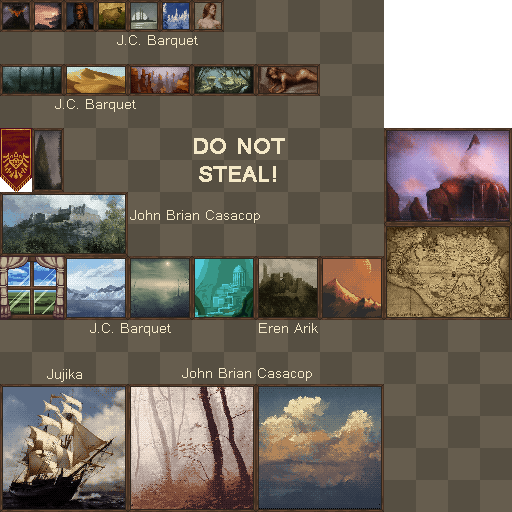
<style>
.page{position:relative;width:512px;height:512px;background:#564f42}
.page>*{position:absolute;margin:0}
.t1{font:16px "Raavi";color:#f5e9c8}
.t2{font:24px "Raavi";color:#f5e9c8;font-weight:bold}
</style>
<div class="page">
<p class="t1" style="left:117px;top:35px;width:81px;height:13px">J.C. Barquet</p>
<p class="t1" style="left:55px;top:99px;width:81px;height:13px">J.C. Barquet</p>
<p class="t2" style="left:194px;top:138px;width:91px;height:44px;text-align:center">DO NOT<br>STEAL!</p>
<p class="t1" style="left:130px;top:210px;width:130px;height:13px">John Brian Casacop</p>
<p class="t1" style="left:90px;top:323px;width:81px;height:13px">J.C. Barquet</p>
<p class="t1" style="left:259px;top:323px;width:59px;height:10px">Eren Arik</p>
<p class="t1" style="left:47px;top:369px;width:35px;height:13px">Jujika</p>
<p class="t1" style="left:182px;top:368px;width:130px;height:13px">John Brian Casacop</p>
</div>
